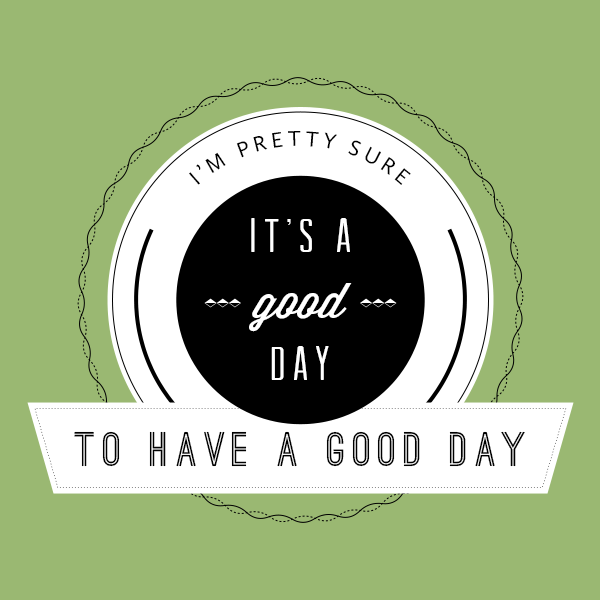
<style>
.page{position:relative;width:600px;height:600px;background:#9ab872}
.page>*{position:absolute;margin:0}
.t1{font:22px/6px "CallunaSans-Regular";letter-spacing:0.185em;color:#000000}
.t2{font:48px "ArvilSans";letter-spacing:0.15em;color:#ffffff}
.t3{font:48px "WisdomScriptAI";color:#ffffff}
.t4{font:46px "OstrichSans-Bold";letter-spacing:0.15em;color:#000000}
</style>
<div class="page">
<p class="t1" style="left:189px;top:131px;width:222px;height:54px;text-align:center">I’M PRETTY SURE</p>
<p class="t2" style="left:251px;top:218px;width:99px;height:34px">IT’S A</p>
<p class="t3" style="left:249px;top:283px;width:103px;height:49px">good</p>
<p class="t2" style="left:271px;top:346px;width:58px;height:34px">DAY</p>
<p class="t4" style="left:74px;top:431px;width:451px;height:36px">TO HAVE A GOOD DAY</p>
</div>
